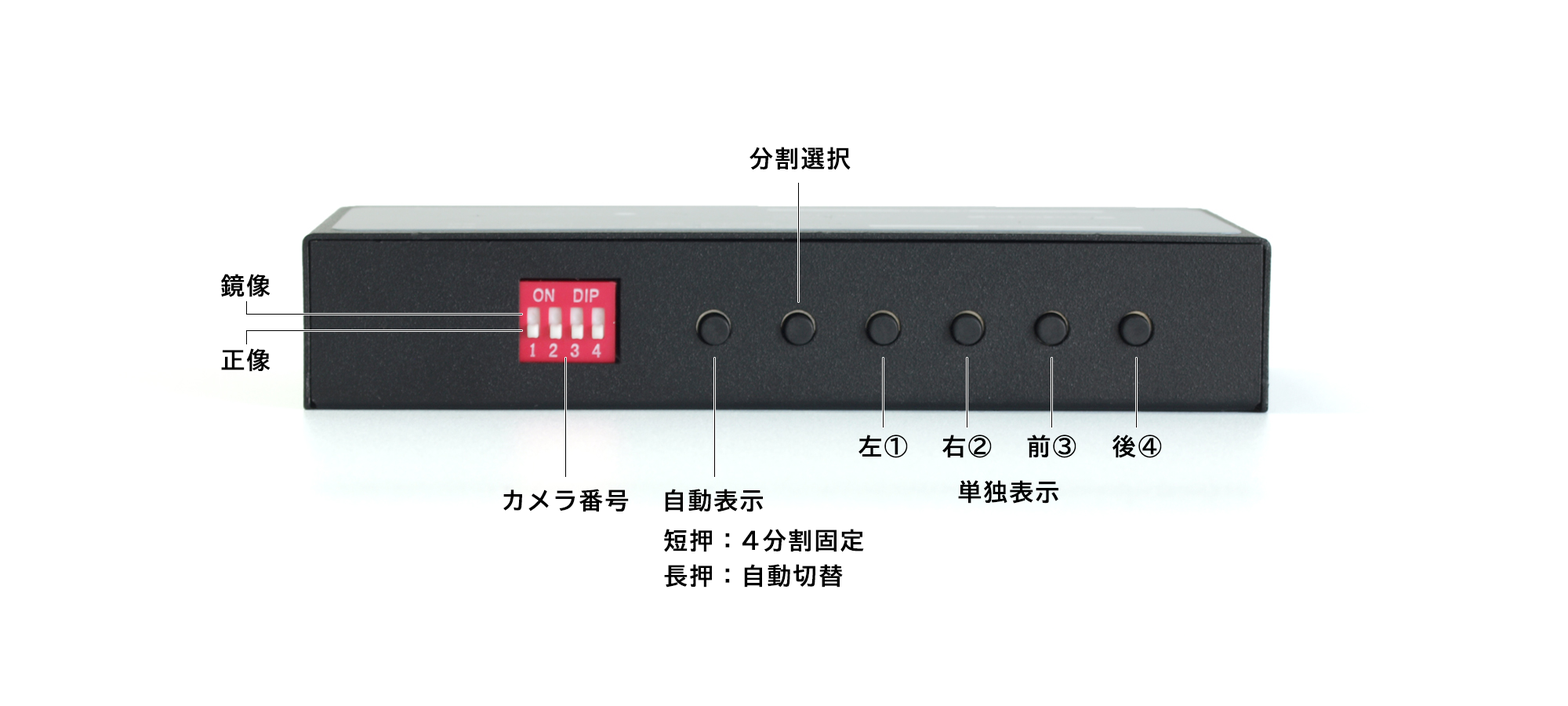
<style>
.page{position:relative;width:1568px;height:706px;background:#ffffff}
.page>*{position:absolute;margin:0}
.t1{font:23.5px "TBUDGoStd-Bold";letter-spacing:0.1em;color:#000000}
.t2{font:23.5px/35.3px "TBUDGoStd-Bold";letter-spacing:0.1em;color:#000000}
</style>
<div class="page">
<p class="t1" style="left:750px;top:147px;width:101px;height:23px">分割選択</p>
<p class="t1" style="left:221px;top:274px;width:49px;height:23px">鏡像</p>
<p class="t1" style="left:221px;top:348px;width:49px;height:24px">正像</p>
<p class="t1" style="left:858px;top:434px;width:50px;height:24px">左①</p>
<p class="t1" style="left:942px;top:434px;width:50px;height:24px">右②</p>
<p class="t1" style="left:1027px;top:434px;width:49px;height:24px">前③</p>
<p class="t1" style="left:1112px;top:434px;width:50px;height:24px">後④</p>
<p class="t1" style="left:958px;top:480px;width:100px;height:23px">単独表示</p>
<p class="t1" style="left:503px;top:488px;width:126px;height:24px">カメラ番号</p>
<p class="t1" style="left:665px;top:488px;width:98px;height:24px">自動表示</p>
<p class="t2" style="left:664px;top:528px;width:200px;height:59px">短押：4分割固定<br>長押：自動切替</p>
</div>
